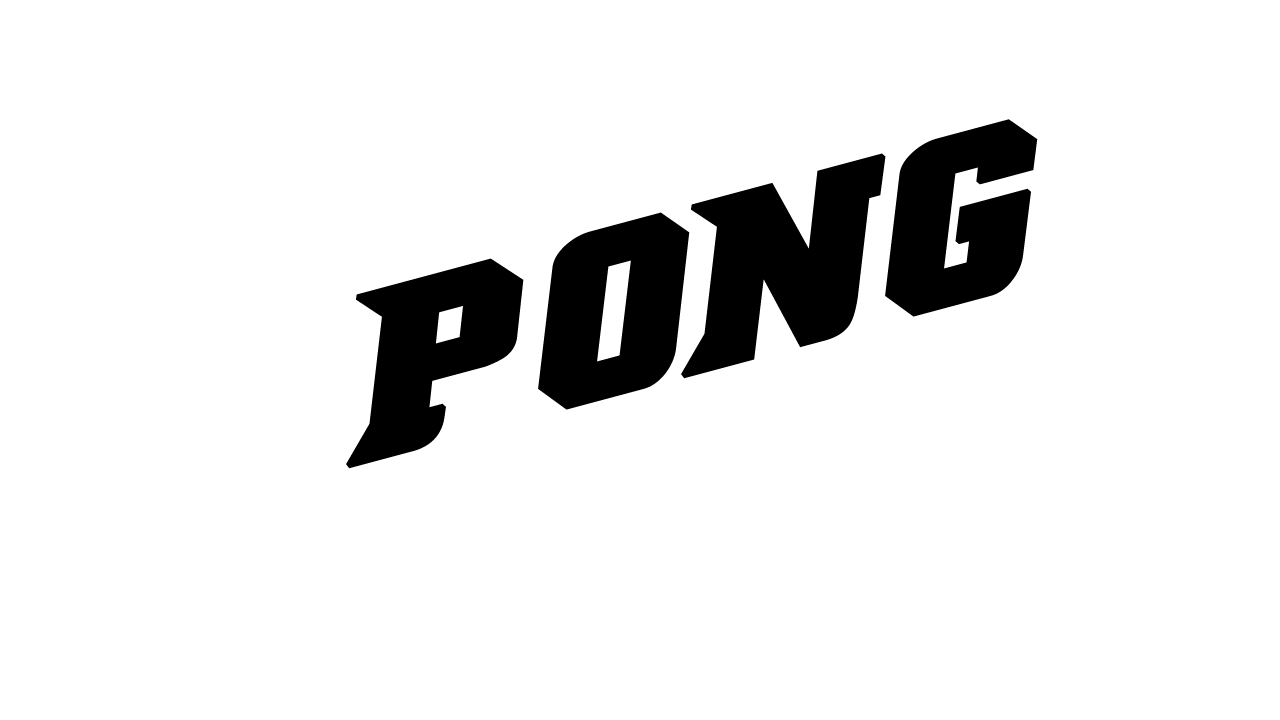
<style>
.page{position:relative;width:1280px;height:720px;background:#ffffff}
.page>*{position:absolute;margin:0}
.t1{font:200px "Demonized";color:#000000;font-weight:bold}
</style>
<div class="page">
<p class="t1" style="left:346px;top:119px;width:692px;height:350px;rotate:-15deg">PONG</p>
</div>
